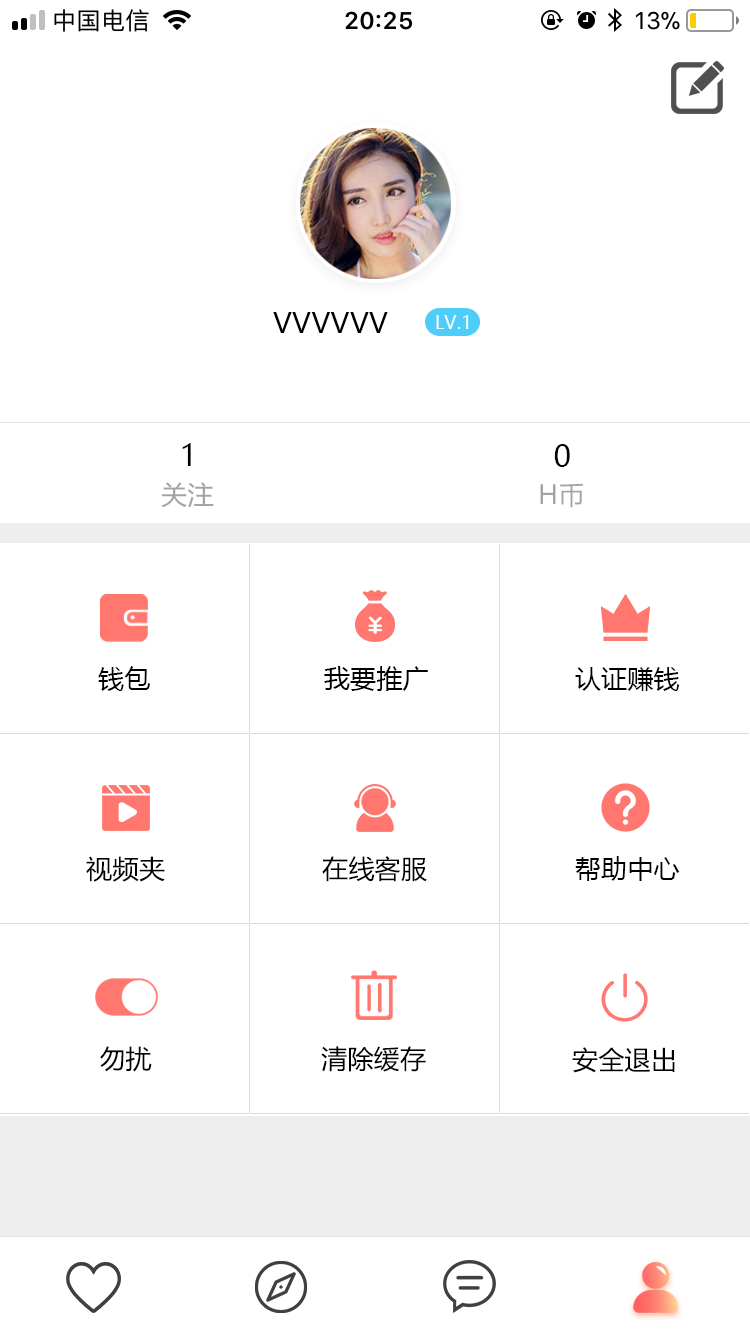
<style>
.page{position:relative;width:750px;height:1334px;background:#ffffff}
.page>*{position:absolute;margin:0}
.t1{font:28px "MicrosoftYaHei";letter-spacing:0.01em;color:#000000}
.t2{font:18px "MicrosoftYaHei";letter-spacing:0.01em;color:#ffffff}
.t3{font:30px "MicrosoftYaHei";color:#000000}
.t4{font:26px "MicrosoftYaHei";letter-spacing:0.01em;color:#a3a3a3}
.t5{font:26px "MicrosoftYaHei";letter-spacing:0.01em;color:#000000}
.t6{font:26.1px "MicrosoftYaHei";letter-spacing:0.01em;color:#000000}
</style>
<div class="page">
<p class="t1" style="left:273px;top:312px;width:115px;height:21px">VVVVVV</p>
<p class="t2" style="left:436px;top:315px;width:33px;height:14px">LV.1</p>
<p class="t3" style="left:182px;top:443px;width:9px;height:23px">1</p>
<p class="t3" style="left:554px;top:444px;width:16px;height:23px">0</p>
<p class="t4" style="left:161px;top:482px;width:53px;height:26px">关注</p>
<p class="t4" style="left:540px;top:483px;width:43px;height:25px">H币</p>
<p class="t5" style="left:98px;top:666px;width:52px;height:25px">钱包</p>
<p class="t5" style="left:324px;top:666px;width:104px;height:25px">我要推广</p>
<p class="t5" style="left:575px;top:667px;width:105px;height:24px">认证赚钱</p>
<p class="t6" style="left:86px;top:856px;width:79px;height:26px">视频夹</p>
<p class="t6" style="left:322px;top:856px;width:105px;height:26px">在线客服</p>
<p class="t5" style="left:575px;top:856px;width:105px;height:25px">帮助中心</p>
<p class="t6" style="left:100px;top:1046px;width:52px;height:26px">勿扰</p>
<p class="t6" style="left:321px;top:1046px;width:105px;height:26px">清除缓存</p>
<p class="t6" style="left:572px;top:1047px;width:103px;height:26px">安全退出</p>
</div>
